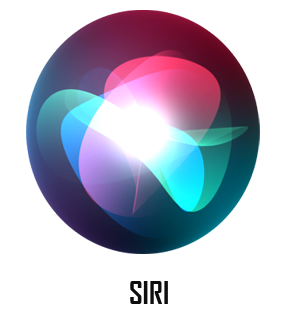
<style>
.page{position:relative;width:298px;height:312px;background:#ffffff}
.page>*{position:absolute;margin:0}
.t1{font:30px "AgencyFB-Bold";color:#0f0e0e}
</style>
<div class="page">
<p class="t1" style="left:130px;top:281px;width:38px;height:23px">SIRI</p>
</div>
